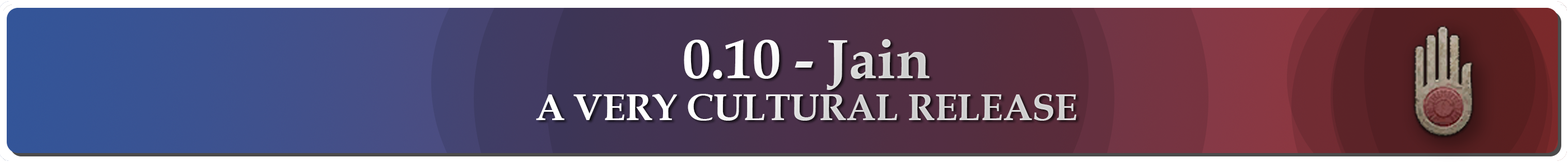
<style>
.page{position:relative;width:1568px;height:162px}
.page>*{position:absolute;margin:0}
.t1{font:37.3px/42px "BookAntiqua-Bold"}
.t2{font:56px "BookAntiqua-Bold"}
</style>
<div class="page">
<p class="t1" style="left:536px;top:39px;width:540px;height:82px;text-align:center"><span class="t2">0.10 - Jain<br></span>A VERY CULTURAL RELEASE</p>
</div>
